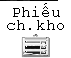
<style>
.page{position:relative;width:71px;height:58px;background:#ffffff}
.page>*{position:absolute;margin:0}
.t1{font:12px/13.3px "CourierNewPSMT";color:#000000}
</style>
<div class="page">
<p class="t1" style="left:7px;top:3px;width:57px;height:27px;text-align:center">Phiếu<br>ch.kho</p>
</div>
